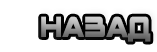
<style>
.page{position:relative;width:157px;height:52px;background:#ffffff}
.page>*{position:absolute;margin:0}
.t1{font:40px "SpaceRangerRUSBYLYAJKA";letter-spacing:0.001em;scale:0.8 1}
</style>
<div class="page">
<p class="t1" style="left:41px;top:16px;width:110px;height:26px">Назад</p>
</div>
